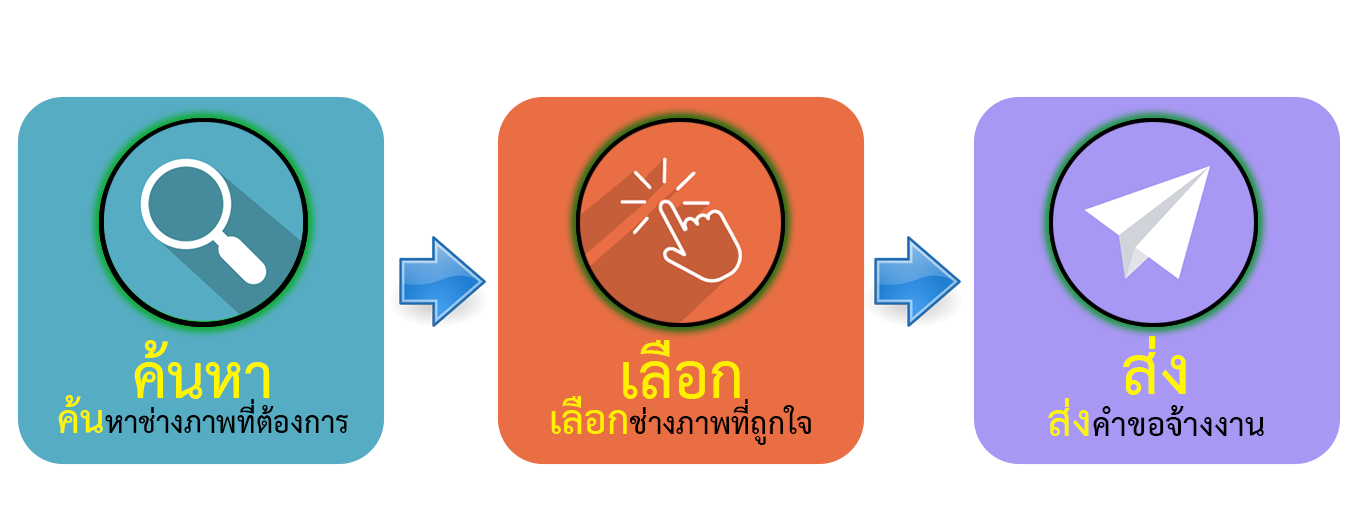
<style>
.page{position:relative;width:1369px;height:530px;background:#ffffff}
.page>*{position:absolute;margin:0}
.t1{font:88px "THSarabunPSK-Bold";color:#fff600}
.t2{font:89.6px "THSarabunPSK-Bold";color:#fff000}
.t3{font:96.3px "THSarabunPSK-Bold";color:#fff600}
.t4{font:43.3px "THSarabunPSK-Bold";color:#000000}
.t5{font:57.2px "THSarabunPSK-Bold";color:#fff600}
.t6{font:44.1px "THSarabunPSK-Bold";color:#000000}
.t7{font:58.2px "THSarabunPSK-Bold";color:#fff000}
.t8{font:47.4px "THSarabunPSK-Bold";color:#000000}
.t9{font:62.6px "THSarabunPSK-Bold";color:#fef500}
</style>
<div class="page">
<p class="t1" style="left:134px;top:340px;width:136px;height:59px">ค้นหา</p>
<p class="t2" style="left:623px;top:340px;width:117px;height:59px">เลือก</p>
<p class="t3" style="left:1123px;top:336px;width:63px;height:59px">ส่ง</p>
<p class="t4" style="left:58px;top:395px;width:291px;height:38px"><span class="t5">ค้น</span>หาช่างภาพที่ต้องการ</p>
<p class="t6" style="left:551px;top:396px;width:260px;height:49px"><span class="t7">เลือก</span>ช่างภาพที่ถูกใจ</p>
<p class="t8" style="left:1048px;top:398px;width:216px;height:38px"><span class="t9">ส่ง</span>คำขอจ้างงาน</p>
</div>
